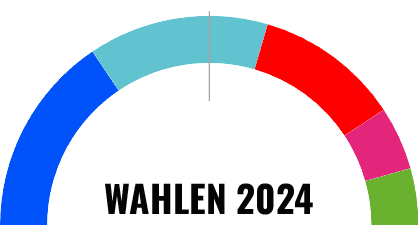
<style>
.page{position:relative;width:418px;height:225px;background:#ffffff}
.page>*{position:absolute;margin:0}
.t1{font:37.2px "Oswald-Bold";color:#040404}
</style>
<div class="page">
<p class="t1" style="left:105px;top:183px;width:208px;height:32px">WAHLEN 2024</p>
</div>
